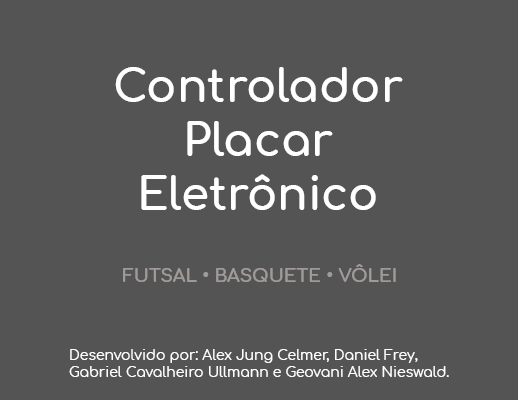
<style>
.page{position:relative;width:518px;height:400px;background:#545454}
.page>*{position:absolute;margin:0}
.t1{font:45px "Comfortaa-Bold";color:#ffffff}
.t2{font:18px "Comfortaa-Bold";color:#a09b98}
.t3{font:14px "Comfortaa-Regular";color:#ffffff}
</style>
<div class="page">
<p class="t1" style="left:115px;top:67px;width:288px;height:143px;text-align:center">Controlador<br>Placar<br>Eletrônico</p>
<p class="t2" style="left:123px;top:264px;width:273px;height:18px">FUTSAL • BASQUETE • VÔLEI</p>
<p class="t3" style="left:69px;top:349px;width:380px;height:28px">Desenvolvido por: Alex Jung Celmer, Daniel Frey, <br>Gabriel Cavalheiro Ullmann e Geovani Alex Nieswald.</p>
</div>
